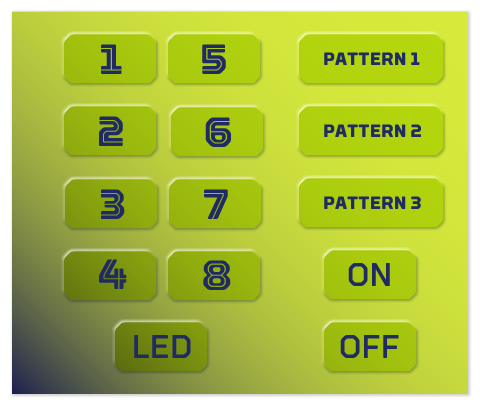
<style>
.page{position:relative;width:480px;height:409px}
.page>*{position:absolute;margin:0}
.t1{font:42px "Torque-Inline";color:#202b63}
.t2{font:18px "Torque-Bold";color:#202b63}
.t3{font:32.7px "Torque-Medium";color:#202b63}
</style>
<div class="page">
<p class="t1" style="left:101px;top:44px;width:21px;height:30px">1</p>
<p class="t1" style="left:202px;top:44px;width:24px;height:30px">5</p>
<p class="t2" style="left:324px;top:52px;width:96px;height:13px">PATTERN 1</p>
<p class="t1" style="left:99px;top:116px;width:24px;height:30px">2</p>
<p class="t1" style="left:205px;top:117px;width:26px;height:30px">6</p>
<p class="t2" style="left:324px;top:124px;width:97px;height:13px">PATTERN 2</p>
<p class="t1" style="left:101px;top:189px;width:24px;height:30px">3</p>
<p class="t1" style="left:204px;top:189px;width:24px;height:30px">7</p>
<p class="t2" style="left:324px;top:196px;width:97px;height:13px">PATTERN 3</p>
<p class="t1" style="left:99px;top:259px;width:28px;height:30px">4</p>
<p class="t1" style="left:203px;top:260px;width:28px;height:30px">8</p>
<p class="t3" style="left:348px;top:263px;width:42px;height:23px">ON</p>
<p class="t3" style="left:134px;top:335px;width:57px;height:23px">LED</p>
<p class="t3" style="left:340px;top:335px;width:59px;height:23px">OFF</p>
</div>
